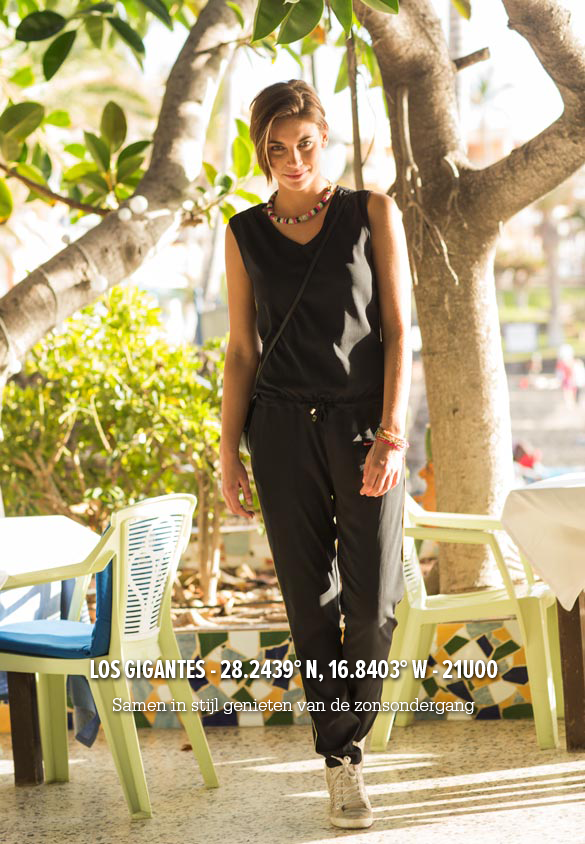
<style>
.page{position:relative;width:585px;height:844px}
.page>*{position:absolute;margin:0}
.t1{font:26.5px/17px "ProximaNovaExCn-Bold";color:#ffffff;scale:0.96 1}
.t2{font:19.1px/17px "SerifaStd-Light";color:#ffffff;scale:0.96 1}
</style>
<div class="page">
<p class="t1" style="left:90px;top:660px;width:408px;height:54px;text-align:center">LOS GIGANTES - 28.2439° N, 16.8403° W - 21U00<br><br><span class="t2">Samen in stijl genieten van de zonsondergang</span></p>
</div>
